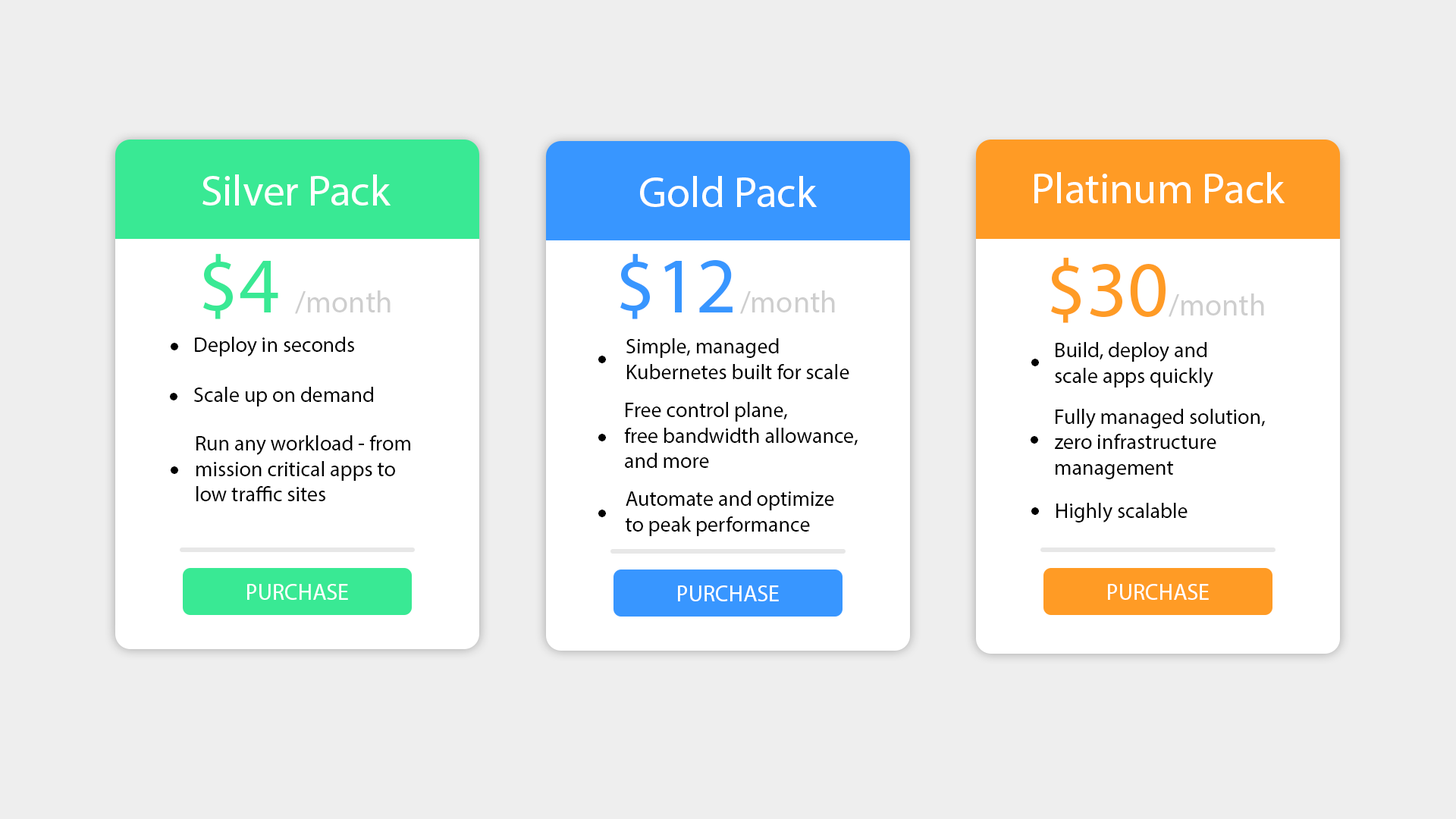
<style>
.page{position:relative;width:1456px;height:819px;background:#eeeeee}
.page>*{position:absolute;margin:0}
.t1{font:43.2px "MyriadPro-Regular";color:#ffffff}
.t2{font:79.6px "MyriadPro-Regular";color:#39e994}
.t3{font:79.6px "MyriadPro-Regular";color:#3896ff}
.t4{font:79.6px "MyriadPro-Regular";color:#ff9b25}
.t5{font:30.7px "MyriadPro-Regular";color:#cecece}
.t6{font:21.2px "MyriadPro-Regular";color:#000000}
.t7{font:36.1px "MyriadPro-Regular";color:#000000}
.t8{font:22.7px "MyriadPro-Regular";color:#ffffff}
</style>
<div class="page">
<p class="t1" style="left:1034px;top:172px;width:251px;height:31px">Platinum Pack</p>
<p class="t1" style="left:202px;top:174px;width:189px;height:32px">Silver Pack</p>
<p class="t1" style="left:640px;top:176px;width:177px;height:31px">Gold Pack</p>
<p class="t2" style="left:203px;top:253px;width:75px;height:66px">$4</p>
<p class="t3" style="left:620px;top:253px;width:113px;height:66px">$12</p>
<p class="t4" style="left:1051px;top:257px;width:115px;height:66px">$30</p>
<p class="t5" style="left:295px;top:290px;width:96px;height:24px">/month</p>
<p class="t5" style="left:740px;top:290px;width:95px;height:24px">/month</p>
<p class="t5" style="left:1169px;top:293px;width:95px;height:24px">/month</p>
<p class="t6" style="left:195px;top:337px;width:159px;height:19px">Deploy in seconds</p>
<p class="t6" style="left:626px;top:338px;width:223px;height:41px">Simple, managed<br>Kubernetes built for scale</p>
<p class="t7" style="left:171px;top:343px;width:7px;height:7px">•</p>
<p class="t6" style="left:1055px;top:342px;width:158px;height:46px">Build, deploy and<br>scale apps quickly</p>
<p class="t7" style="left:598px;top:356px;width:8px;height:7px">•</p>
<p class="t7" style="left:1031px;top:359px;width:8px;height:7px">•</p>
<p class="t6" style="left:194px;top:387px;width:179px;height:19px">Scale up on demand</p>
<p class="t7" style="left:170px;top:393px;width:7px;height:7px">•</p>
<p class="t6" style="left:624px;top:402px;width:234px;height:66px">Free control plane,<br>free bandwidth allowance,<br>and more</p>
<p class="t6" style="left:1055px;top:409px;width:210px;height:70px">Fully managed solution,<br>zero infrastructure<br>management</p>
<p class="t6" style="left:196px;top:435px;width:214px;height:66px">Run any workload - from<br>mission critical apps to<br>low traffic sites</p>
<p class="t7" style="left:598px;top:434px;width:8px;height:7px">•</p>
<p class="t7" style="left:1031px;top:436px;width:7px;height:8px">•</p>
<p class="t7" style="left:171px;top:466px;width:7px;height:8px">•</p>
<p class="t6" style="left:626px;top:491px;width:208px;height:45px">Automate and optimize<br>to peak performance</p>
<p class="t7" style="left:598px;top:510px;width:8px;height:7px">•</p>
<p class="t7" style="left:1031px;top:507px;width:8px;height:8px">•</p>
<p class="t6" style="left:1056px;top:503px;width:132px;height:19px">Highly scalable</p>
<p class="t8" style="left:247px;top:584px;width:101px;height:16px">PURCHASE</p>
<p class="t8" style="left:678px;top:585px;width:101px;height:16px">PURCHASE</p>
<p class="t8" style="left:1108px;top:584px;width:101px;height:16px">PURCHASE</p>
</div>
